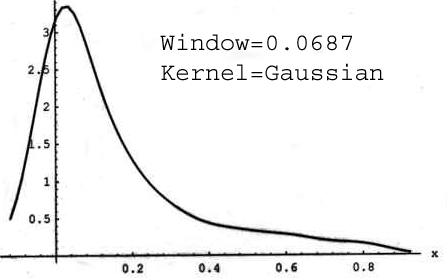
<style>
.page{position:relative;width:447px;height:278px;background:#ffffff}
.page>*{position:absolute;margin:0}
.t1{font:24.9px "Courier";color:#000000}
</style>
<div class="page">
<p class="t1" style="left:160px;top:33px;width:224px;height:48px">Window=0.0687<br>Kernel=Gaussian</p>
</div>
